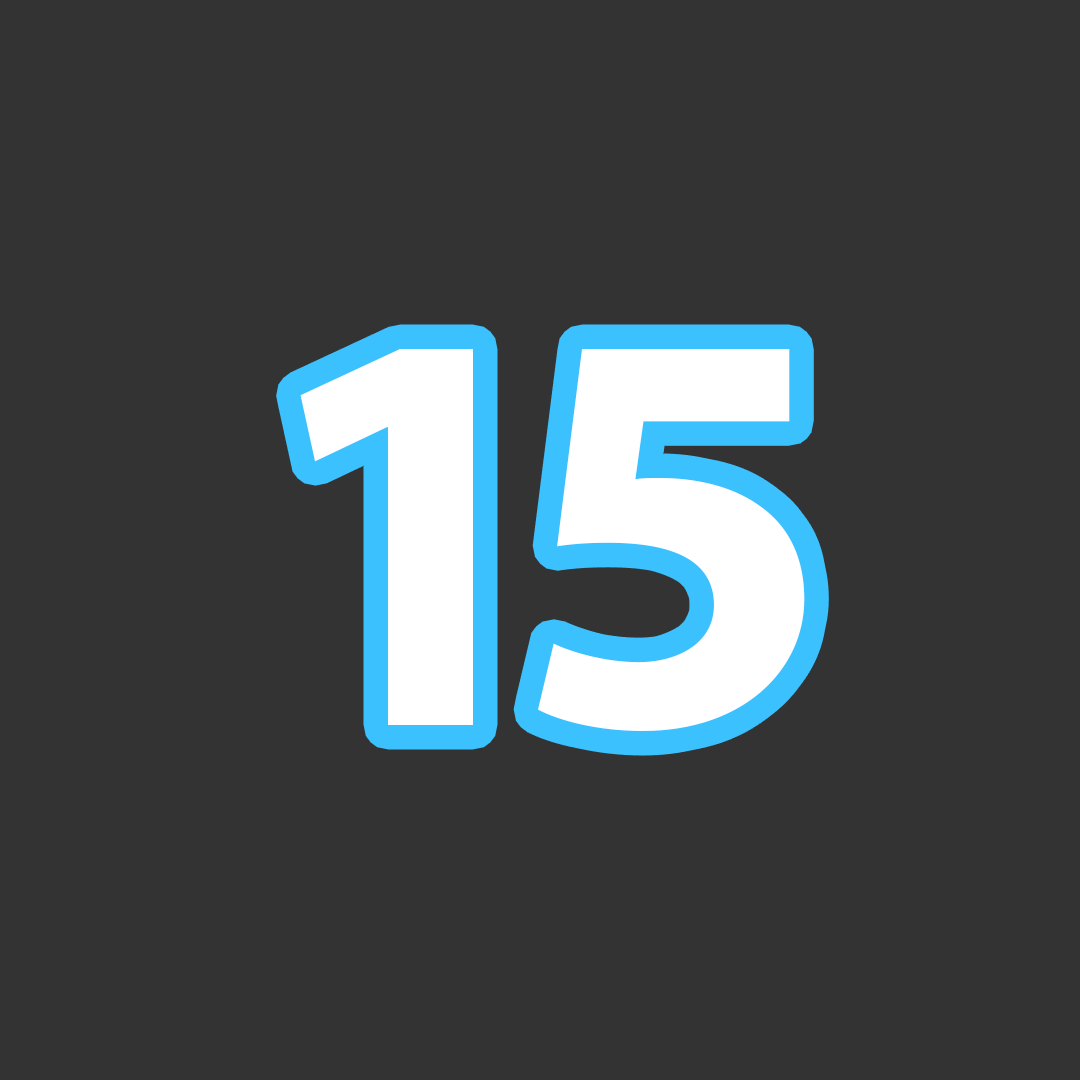
<style>
.page{position:relative;width:1080px;height:1080px;background:#333333}
.page>*{position:absolute;margin:0}
.t1{font:578.7px "MyriadPro-Bold";letter-spacing:-0.1em;color:#ffffff}
</style>
<div class="page">
<p class="t1" style="left:300px;top:349px;width:505px;height:382px">15</p>
</div>
